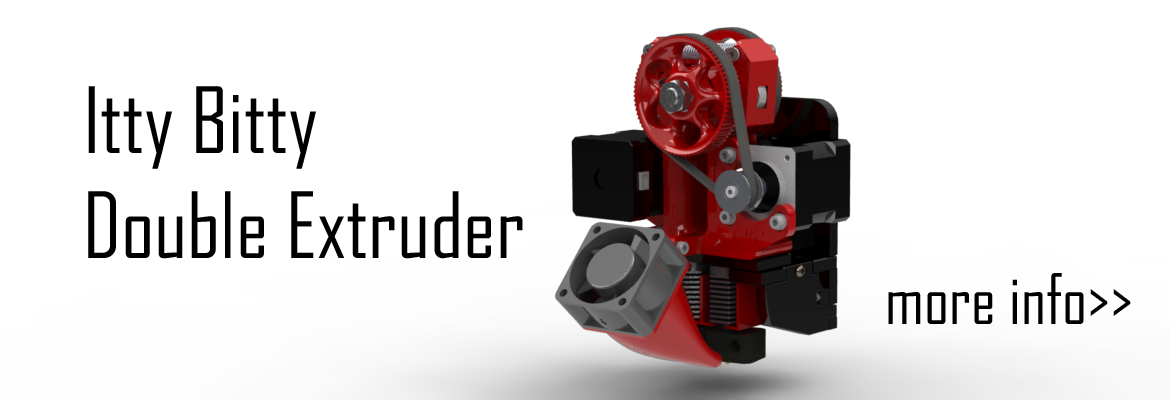
<style>
.page{position:relative;width:1170px;height:400px;background:#ffffff}
.page>*{position:absolute;margin:0}
.t1{font:87.5px "AgencyFB-Reg";color:#000000}
.t2{font:66.7px "AgencyFB-Reg";color:#000000}
</style>
<div class="page">
<p class="t1" style="left:88px;top:86px;width:435px;height:173px">Itty Bitty<br>Double Extruder</p>
<p class="t2" style="left:888px;top:273px;width:243px;height:51px">more info&gt;&gt;</p>
</div>
